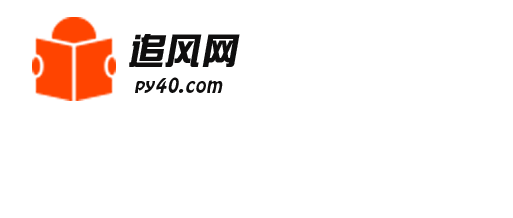
<style>
.page{position:relative;width:513px;height:218px;background:#ffffff}
.page>*{position:absolute;margin:0}
.t1{font:34.7px "SingyiEG-Ultra-GB";letter-spacing:0.05em;color:#0f0e0e;font-style:italic}
.t2{font:18.7px "HoboStd";letter-spacing:0.05em;color:#0f0e0e;font-style:italic}
</style>
<div class="page">
<p class="t1" style="left:129px;top:34px;width:111px;height:33px">追风网</p>
<p class="t2" style="left:135px;top:77px;width:88px;height:16px">py40.com</p>
</div>
